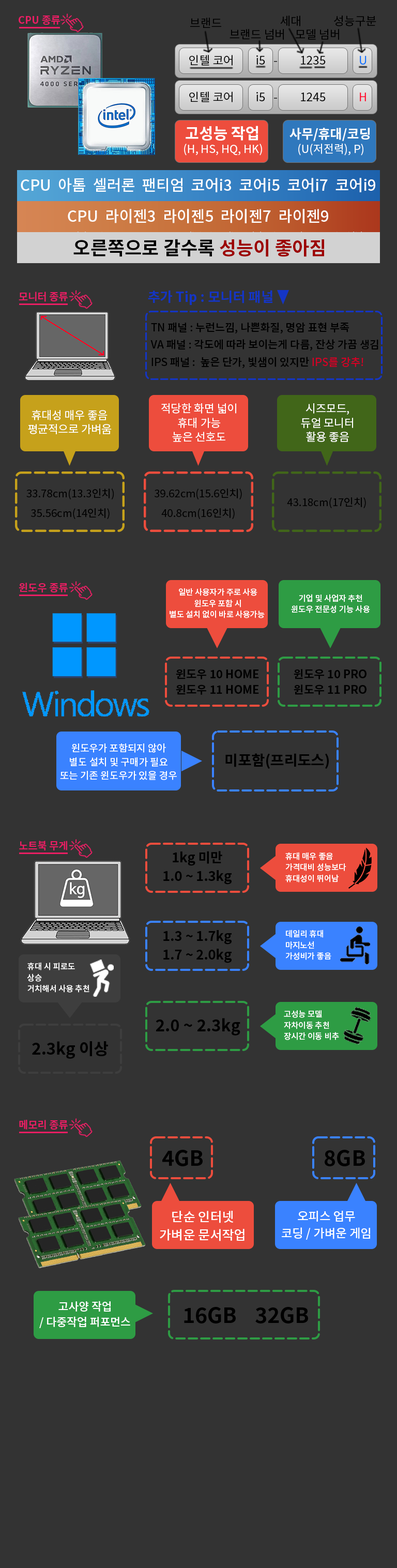
<style>
.page{position:relative;width:397px;height:1568px;background:#333333}
.page>*{position:absolute;margin:0}
.t1{font:10.3px "NotoSansKR-Bold";color:#e91e63}
.t2{font:11.7px "NotoSansKR-Regular";color:#000000}
.t3{font:11.7px "NotoSansKR-Regular"}
.t4{font:11.7px "NotoSansKR-Regular";color:#006eff}
.t5{font:11.7px "NotoSansKR-Regular";color:#ff002a}
.t6{font:15.5px "NotoSansKR-Bold";color:#ffffff}
.t7{font:12.9px "NotoSansKR-Bold";color:#ffffff}
.t8{font:11.3px "NotoSansKR-Regular";color:#ffffff}
.t9{font:15.3px "NotoSansKR-Medium";color:#ffffff}
.t10{font:18.7px "NotoSansKR-Bold";color:#000000}
.t11{font:18.7px "NotoSansKR-Bold";color:#9c0000}
.t12{font:13.6px "NotoSansKR-Bold";color:#1435c6}
.t13{font:10.7px/17.5px "NotoSansKR-Medium";color:#000000}
.t14{font:10.7px/17.5px "NotoSansKR-Medium";color:#d70024}
.t15{font:11.1px/13.9px "NotoSansKR-Regular";color:#ffffff}
.t16{font:11.2px/14px "NotoSansKR-Regular";color:#ffffff}
.t17{font:10.5px/19.6px "NotoSansKR-Regular";color:#000000}
.t18{font:10.5px "NotoSansKR-Regular";color:#000000}
.t19{font:8px/11.1px "NotoSansKR-Medium";color:#ffffff}
.t20{font:11.3px/15.7px "NotoSansKR-Bold";color:#000000}
.t21{font:9.8px/13.7px "NotoSansKR-Medium";color:#ffffff}
.t22{font:14.7px "NotoSansKR-Bold";color:#000000}
.t23{font:13.2px/18.4px "NotoSansKR-Bold";color:#000000}
.t24{font:8px/11.2px "NotoSansKR-Medium";color:#ffffff}
.t25{font:16.2px "NotoSansKR-Bold";color:#000000}
.t26{font:21.1px "NotoSansKR-Bold";color:#000000}
.t27{font:13px/18.1px "NotoSansKR-Medium";color:#ffffff}
.t28{font:12.1px/16.8px "NotoSansKR-Medium";color:#ffffff}
.t29{font:11.1px/15.5px "NotoSansKR-Medium";color:#ffffff}
</style>
<div class="page">
<p class="t1" style="left:19px;top:16px;width:41px;height:9px">CPU 종류</p>
<p class="t2" style="left:190px;top:18px;width:31px;height:10px">브랜드</p>
<p class="t2" style="left:280px;top:16px;width:20px;height:10px">세대</p>
<p class="t2" style="left:334px;top:16px;width:42px;height:10px">성능구분</p>
<p class="t2" style="left:230px;top:29px;width:54px;height:11px">브랜드 넘버</p>
<p class="t2" style="left:295px;top:29px;width:44px;height:11px">모델 넘버</p>
<p class="t2" style="left:189px;top:55px;width:44px;height:11px">인텔 코어</p>
<p class="t2" style="left:256px;top:55px;width:9px;height:10px">i5</p>
<p class="t3" style="left:274px;top:61px;width:3px;height:1px">-</p>
<p class="t2" style="left:301px;top:56px;width:25px;height:9px">1235</p>
<p class="t4" style="left:360px;top:56px;width:7px;height:9px">U</p>
<p class="t2" style="left:189px;top:92px;width:44px;height:10px">인텔 코어</p>
<p class="t2" style="left:256px;top:92px;width:9px;height:9px">i5</p>
<p class="t3" style="left:274px;top:98px;width:3px;height:1px">-</p>
<p class="t2" style="left:301px;top:93px;width:25px;height:8px">1245</p>
<p class="t5" style="left:360px;top:93px;width:6px;height:8px">H</p>
<p class="t6" style="left:186px;top:126px;width:72px;height:15px">고성능 작업</p>
<p class="t7" style="left:290px;top:128px;width:80px;height:13px">사무/휴대/코딩</p>
<p class="t8" style="left:184px;top:144px;width:78px;height:12px">(H, HS, HQ, HK)</p>
<p class="t8" style="left:298px;top:143px;width:65px;height:13px">(U(저전력), P)</p>
<p class="t9" style="left:21px;top:178px;width:354px;height:14px">CPU  아톰  셀러론  팬티엄  코어i3  코어i5  코어i7  코어i9</p>
<p class="t9" style="left:68px;top:209px;width:260px;height:14px">CPU  라이젠3  라이젠5  라이젠7  라이젠9</p>
<p class="t10" style="left:73px;top:239px;width:251px;height:18px">오른쪽으로 갈수록 <span class="t11">성능이 좋아짐</span></p>
<p class="t1" style="left:19px;top:292px;width:49px;height:10px">모니터 종류</p>
<p class="t12" style="left:148px;top:290px;width:124px;height:15px">추가 Tip : 모니터 패널</p>
<p class="t13" style="left:150px;top:322px;width:228px;height:47px">TN 패널 : 누런느낌, 나쁜화질, 명암 표현 부족<br>VA 패널 : 각도에 따라 보이는게 다름, 잔상 가끔 생김<br>IPS 패널 :  높은 단가, 빛샘이 있지만 <span class="t14">IPS를 강추!</span></p>
<p class="t15" style="left:28px;top:410px;width:84px;height:24px;text-align:center">휴대성 매우 좋음<br>평균적으로 가벼움</p>
<p class="t16" style="left:161px;top:403px;width:75px;height:39px;text-align:center">적당한 화면 넓이<br>휴대 가능<br>높은 선호도</p>
<p class="t16" style="left:301px;top:403px;width:52px;height:39px;text-align:center">시즈모드,<br>듀얼 모니터<br>활용 좋음</p>
<p class="t17" style="left:26px;top:489px;width:88px;height:30px;text-align:center">33.78cm(13.3인치)<br>35.56cm(14인치)</p>
<p class="t17" style="left:155px;top:489px;width:87px;height:30px;text-align:center">39.62cm(15.6인치)<br>40.8cm(16인치)</p>
<p class="t18" style="left:287px;top:497px;width:79px;height:11px">43.18cm(17인치)</p>
<p class="t1" style="left:19px;top:583px;width:49px;height:9px">윈도우 종류</p>
<p class="t19" style="left:170px;top:588px;width:95px;height:30px;text-align:center">일반 사용자가 주로 사용<br>윈도우 포함 시<br>별도 설치 없이 바로 사용가능</p>
<p class="t19" style="left:291px;top:594px;width:79px;height:19px;text-align:center">기업 및 사업자 추천<br>윈도우 전문성 기능 사용</p>
<p class="t20" style="left:176px;top:669px;width:83px;height:26px;text-align:center">윈도우 10 HOME<br>윈도우 11 HOME</p>
<p class="t20" style="left:294px;top:669px;width:73px;height:26px;text-align:center">윈도우 10 PRO<br>윈도우 11 PRO</p>
<p class="t21" style="left:60px;top:743px;width:117px;height:37px;text-align:center">윈도우가 포함되지 않아<br>별도 설치 및 구매가 필요<br>또는 기존 윈도우가 있을 경우</p>
<p class="t22" style="left:225px;top:753px;width:104px;height:16px">미포함(프리도스)</p>
<p class="t1" style="left:19px;top:841px;width:48px;height:9px">노트북 무게</p>
<p class="t23" style="left:163px;top:851px;width:69px;height:34px;text-align:center">1kg 미만<br>1.0 ~ 1.3kg</p>
<p class="t24" style="left:285px;top:852px;width:61px;height:30px">휴대 매우 좋음<br>가격대비 성능보다<br>휴대성이 뛰어남</p>
<p class="t24" style="left:285px;top:930px;width:46px;height:30px">데일리 휴대<br>마지노선<br>가성비가 좋음</p>
<p class="t23" style="left:163px;top:930px;width:69px;height:33px;text-align:center">1.3 ~ 1.7kg<br>1.7 ~ 2.0kg</p>
<p class="t24" style="left:27px;top:962px;width:62px;height:31px">휴대 시 피로도<br>상승<br>거치해서 사용 추천</p>
<p class="t24" style="left:284px;top:1010px;width:55px;height:30px">고성능 모델<br>자차이동 추천<br>장시간 이동 비추</p>
<p class="t25" style="left:156px;top:1018px;width:84px;height:18px">2.0 ~ 2.3kg</p>
<p class="t25" style="left:32px;top:1041px;width:76px;height:18px">2.3kg 이상</p>
<p class="t1" style="left:19px;top:1120px;width:49px;height:10px">메모리 종류</p>
<p class="t26" style="left:162px;top:1150px;width:41px;height:16px">4GB</p>
<p class="t26" style="left:325px;top:1150px;width:40px;height:16px">8GB</p>
<p class="t27" style="left:160px;top:1211px;width:85px;height:30px;text-align:center">단순 인터넷<br>가벼운 문서작업</p>
<p class="t28" style="left:282px;top:1211px;width:88px;height:29px;text-align:center">오피스 업무<br>코딩 / 가벼운 게임</p>
<p class="t29" style="left:39px;top:1301px;width:91px;height:27px;text-align:center">고사양 작업<br>/ 다중작업 퍼포먼스</p>
<p class="t26" style="left:184px;top:1307px;width:52px;height:16px">16GB</p>
<p class="t26" style="left:255px;top:1307px;width:53px;height:16px">32GB</p>
</div>
